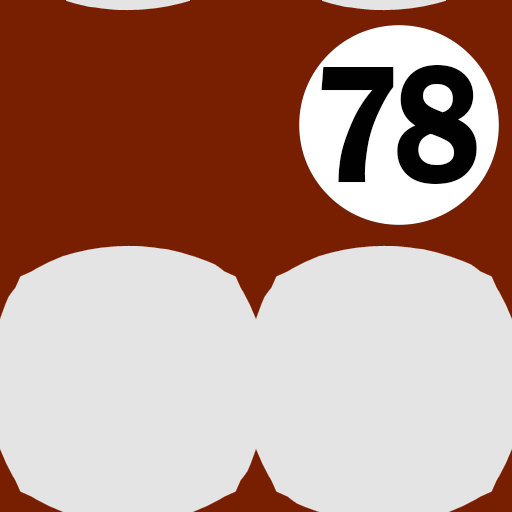
<style>
.page{position:relative;width:512px;height:512px;background:#e4e4e4}
.page>*{position:absolute;margin:0}
.t1{font:172.5px "FranklinGothic-Demi";letter-spacing:-0.05em;color:#010101;scale:0.87 1}
</style>
<div class="page">
<p class="t1" style="left:321px;top:65px;width:156px;height:119px">78</p>
</div>
